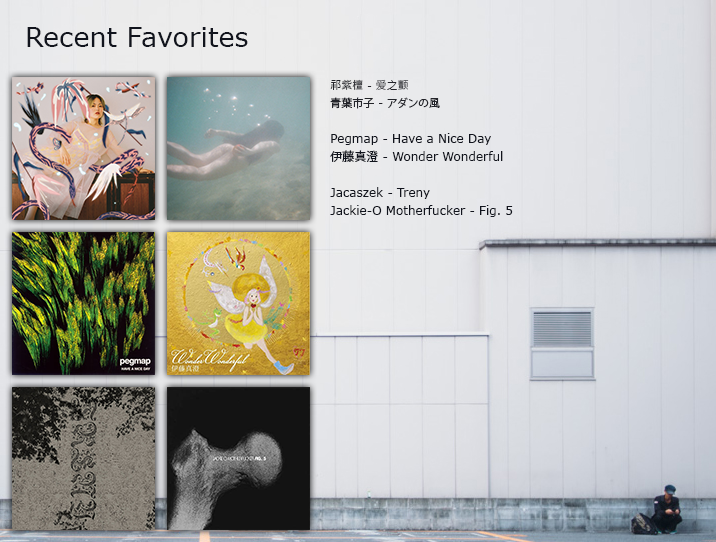
<style>
.page{position:relative;width:716px;height:542px}
.page>*{position:absolute;margin:0}
.t1{font:27px "Verdana";color:#11141d}
.t2{font:12px/18px "Verdana";color:#11141d}
.t3{font:11px/18px "MalgunGothic";color:#23242a}
.t4{font:11px/18px "MicrosoftJhengHeiRegular";color:#23242a}
.t5{font:11px/18px "KozGoPr6N-Regular";color:#23242a}
.t6{font:11px/18px "Verdana";color:#23242a}
.t7{font:12px/18px "KozGoPr6N-Regular";color:#11141d}
</style>
<div class="page">
<p class="t1" style="left:27px;top:27px;width:221px;height:20px">Recent Favorites</p>
<p class="t2" style="left:330px;top:79px;width:183px;height:138px"><span class="t3">祁紫檀 - </span><span class="t4">爱之颤<br></span><span class="t5">青葉市子</span><span class="t6"> - </span><span class="t5">アダンの風<br></span><br>Pegmap - Have a Nice Day<br><span class="t7">伊藤真澄</span> - Wonder Wonderful<br><br>Jacaszek - Treny<br>Jackie-O Motherfucker - Fig. 5</p>
</div>
